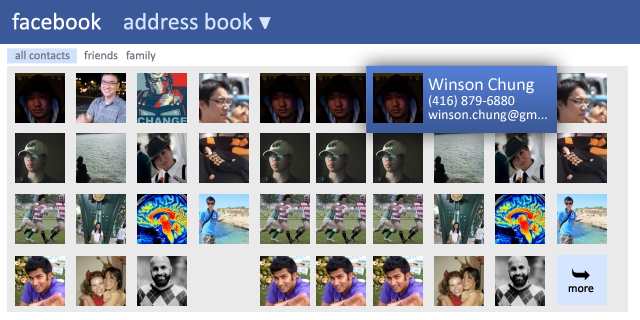
<style>
.page{position:relative;width:640px;height:320px;background:#eaeaea}
.page>*{position:absolute;margin:0}
.t1{font:24px "Calibri";color:#ffffff}
.t2{font:24px "Calibri";color:#d6e5ff}
.t3{font:12px "Calibri";color:#737881}
.t4{font:18px "Calibri";color:#ffffff}
.t5{font:14px "Calibri";color:#ffffff}
.t6{font:12px "Calibri";color:#000000}
</style>
<div class="page">
<p class="t1" style="left:12px;top:12px;width:89px;height:18px">facebook</p>
<p class="t2" style="left:124px;top:12px;width:129px;height:18px">address book</p>
<p class="t3" style="left:15px;top:50px;width:55px;height:10px">all contacts</p>
<p class="t3" style="left:84px;top:50px;width:34px;height:10px">friends</p>
<p class="t3" style="left:126px;top:50px;width:30px;height:12px">family</p>
<p class="t4" style="left:428px;top:77px;width:106px;height:17px">Winson Chung</p>
<p class="t5" style="left:429px;top:95px;width:86px;height:13px">(416) 879-6880</p>
<p class="t5" style="left:428px;top:109px;width:119px;height:13px">winson.chung@gm...l.com</p>
<p class="t6" style="left:568px;top:286px;width:26px;height:7px">more</p>
</div>
